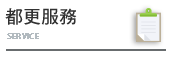
<style>
.page{position:relative;width:171px;height:59px;background:#ffffff}
.page>*{position:absolute;margin:0}
.t1{font:18px "DFHeiStd-W7";color:#313131}
.t2{font:8px "MyriadPro-Regular";color:#b2babf;text-transform:uppercase;font-weight:bold}
</style>
<div class="page">
<p class="t1" style="left:5px;top:8px;width:72px;height:17px">都更服務</p>
<p class="t2" style="left:7px;top:33px;width:32px;height:6px">service</p>
</div>
